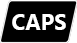
<style>
.page{position:relative;width:77px;height:43px;background:#000000}
.page>*{position:absolute;margin:0}
.t1{font:22px "SegoeUI-Bold";color:#ffffff}
</style>
<div class="page">
<p class="t1" style="left:12px;top:14px;width:54px;height:16px">CAPS</p>
</div>
